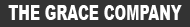
<style>
.page{position:relative;width:190px;height:27px;background:#333333}
.page>*{position:absolute;margin:0}
.t1{font:21.2px "Arial-Black";color:#ffffff;scale:0.66 1}
</style>
<div class="page">
<p class="t1" style="left:8px;top:5px;width:174px;height:15px">THE GRACE COMPANY</p>
</div>
